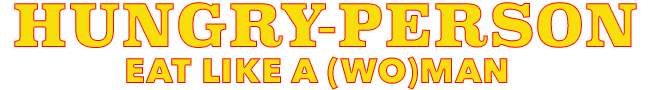
<style>
.page{position:relative;width:650px;height:90px;background:#ffffff}
.page>*{position:absolute;margin:0}
.t1{font:59px "Superclarendon-Black";letter-spacing:0.005em;color:#f8de0b}
.t2{font:35px "AvenirNext-Heavy";letter-spacing:0.005em;color:#f8de0b}
</style>
<div class="page">
<p class="t1" style="left:14px;top:2px;width:623px;height:46px">HUNGRY-PERSON</p>
<p class="t2" style="left:126px;top:56px;width:382px;height:34px">EAT LIKE A (WO)MAN</p>
</div>
